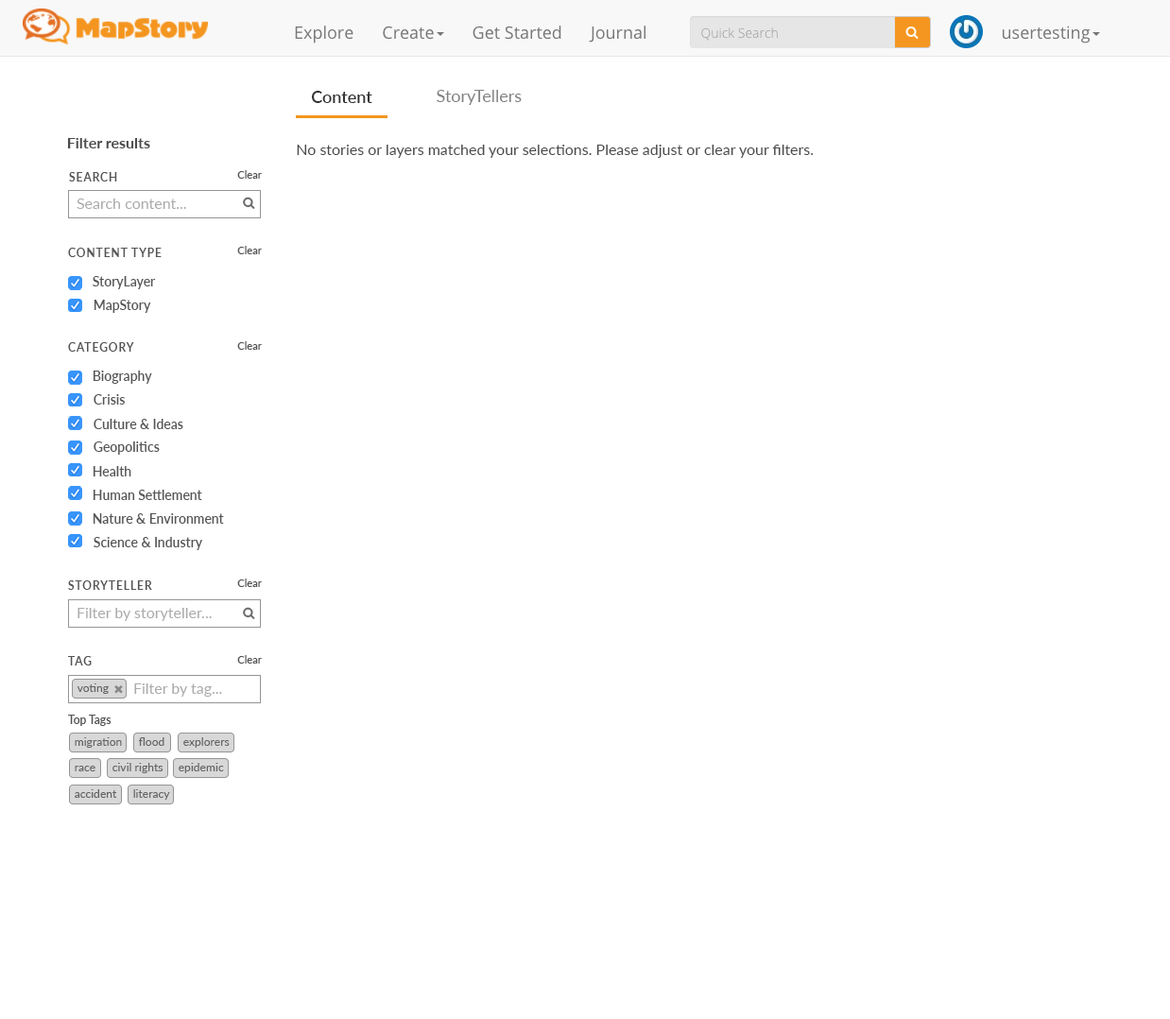
<style>
.page{position:relative;width:1170px;height:1019px;background:#ffffff}
.page>*{position:absolute;margin:0}
.t1{font:17px "Lato-Regular";color:#828282}
.t2{font:17px "Lato-Semibold";color:#333333}
.t3{font:15.1px "Lato-Bold";color:#4b4b4b}
.t4{font:15.1px "Lato-Regular";color:#4a4a4a}
.t5{font:11.3px "Lato-Semibold";letter-spacing:0.08em;color:#555555}
.t6{font:10.4px "Lato-Semibold";color:#555555}
.t7{font:15.1px "Lato-Regular";color:#ababab}
.t8{font:13.2px "Lato-Semibold";color:#555555}
.t9{font:11.3px "Lato-Regular";color:#656565}
.t10{font:11.3px "Lato-Semibold";color:#555555}
</style>
<div class="page">
<p class="t1" style="left:437px;top:90px;width:85px;height:15px">StoryTellers</p>
<p class="t2" style="left:311px;top:91px;width:61px;height:12px">Content</p>
<p class="t3" style="left:67px;top:138px;width:83px;height:10px">Filter results</p>
<p class="t4" style="left:297px;top:145px;width:517px;height:13px">No stories or layers matched your selections. Please adjust or clear your filters.</p>
<p class="t5" style="left:69px;top:172px;width:48px;height:9px">SEARCH</p>
<p class="t6" style="left:237px;top:170px;width:25px;height:9px">Clear</p>
<p class="t7" style="left:77px;top:199px;width:109px;height:10px">Search content...</p>
<p class="t6" style="left:237px;top:246px;width:25px;height:8px">Clear</p>
<p class="t5" style="left:68px;top:248px;width:94px;height:9px">CONTENT TYPE</p>
<p class="t8" style="left:93px;top:276px;width:63px;height:13px">StoryLayer</p>
<p class="t8" style="left:94px;top:300px;width:57px;height:13px">MapStory</p>
<p class="t6" style="left:237px;top:341px;width:25px;height:9px">Clear</p>
<p class="t5" style="left:68px;top:342px;width:66px;height:10px">CATEGORY</p>
<p class="t8" style="left:93px;top:371px;width:59px;height:13px">Biography</p>
<p class="t8" style="left:94px;top:394px;width:31px;height:11px">Crisis</p>
<p class="t8" style="left:94px;top:419px;width:89px;height:10px">Culture &amp; Ideas</p>
<p class="t8" style="left:94px;top:441px;width:66px;height:14px">Geopolitics</p>
<p class="t8" style="left:93px;top:466px;width:38px;height:10px">Health</p>
<p class="t8" style="left:93px;top:490px;width:109px;height:10px">Human Settlement</p>
<p class="t8" style="left:93px;top:513px;width:131px;height:11px">Nature &amp; Environment</p>
<p class="t8" style="left:94px;top:537px;width:108px;height:13px">Science &amp; Industry</p>
<p class="t5" style="left:68px;top:580px;width:84px;height:10px">STORYTELLER</p>
<p class="t6" style="left:237px;top:578px;width:25px;height:9px">Clear</p>
<p class="t7" style="left:78px;top:608px;width:134px;height:13px">Filter by storyteller...</p>
<p class="t5" style="left:68px;top:656px;width:24px;height:9px">TAG</p>
<p class="t6" style="left:237px;top:655px;width:25px;height:9px">Clear</p>
<p class="t9" style="left:77px;top:683px;width:32px;height:11px">voting</p>
<p class="t7" style="left:134px;top:683px;width:88px;height:14px">Filter by tag...</p>
<p class="t10" style="left:68px;top:715px;width:44px;height:11px">Top Tags</p>
<p class="t9" style="left:75px;top:737px;width:47px;height:11px">migration</p>
<p class="t9" style="left:138px;top:737px;width:26px;height:9px">flood</p>
<p class="t9" style="left:183px;top:737px;width:47px;height:11px">explorers</p>
<p class="t9" style="left:75px;top:766px;width:20px;height:5px">race</p>
<p class="t9" style="left:112px;top:763px;width:52px;height:10px">civil rights</p>
<p class="t9" style="left:179px;top:763px;width:45px;height:10px">epidemic</p>
<p class="t9" style="left:75px;top:789px;width:42px;height:9px">accident</p>
<p class="t9" style="left:133px;top:789px;width:37px;height:11px">literacy</p>
</div>
